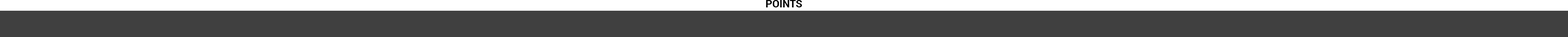
<style>
.page{position:relative;width:1568px;height:37px;background:#404040}
.page>*{position:absolute;margin:0}
.t1{font:10.4px "Roboto-Bold";color:#000000}
</style>
<div class="page">
<p class="t1" style="left:766px;top:0px;width:36px;height:7px">POINTS</p>
</div>
